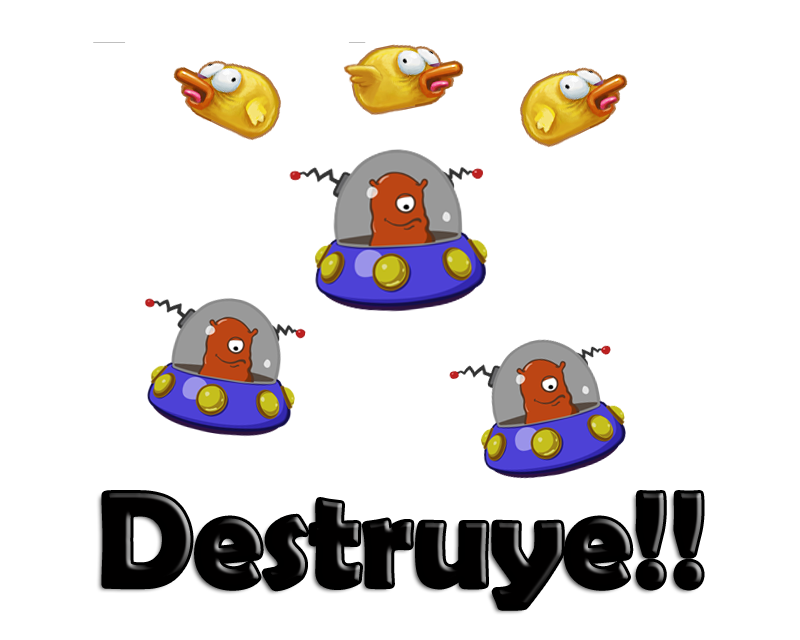
<style>
.page{position:relative;width:800px;height:640px;background:#ffffff}
.page>*{position:absolute;margin:0}
.t1{font:135px "BerlinSansFBDemi-Bold";color:#010000}
</style>
<div class="page">
<p class="t1" style="left:104px;top:493px;width:598px;height:115px">Destruye!!</p>
</div>
